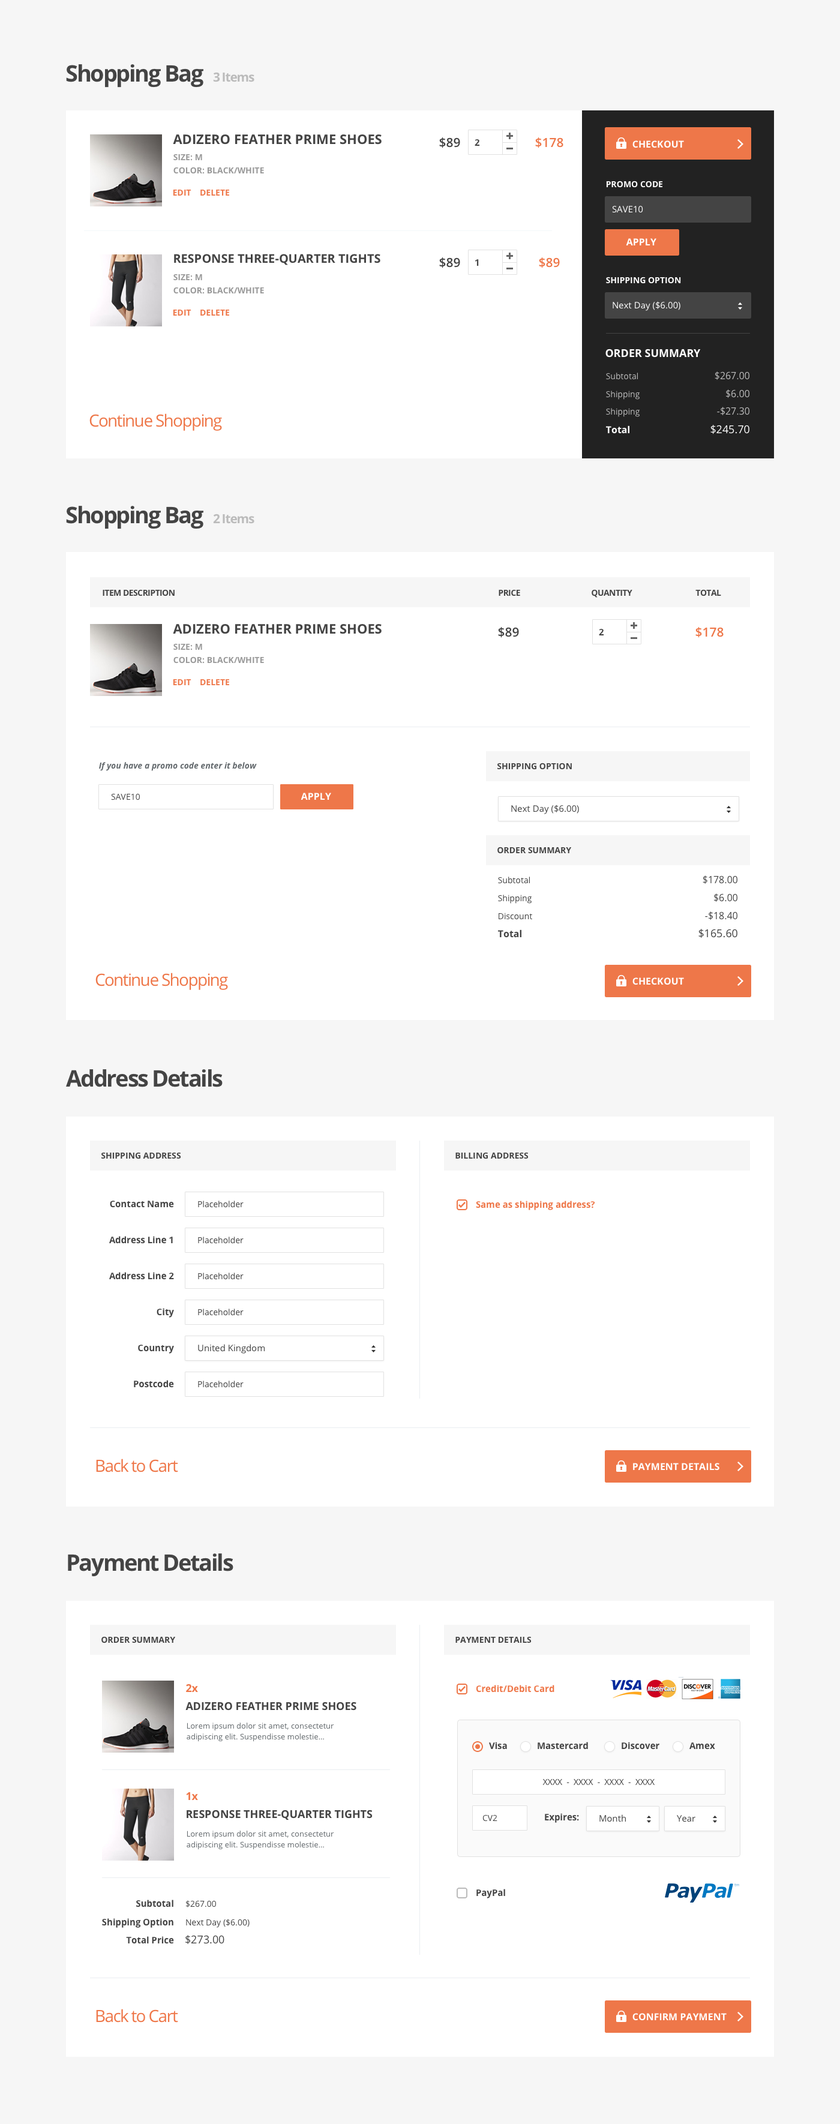
<style>
.page{position:relative;width:840px;height:2124px;background:#ffffff}
.page>*{position:absolute;margin:0}
.t1{font:22.8px "OpenSans-Bold";letter-spacing:-0.06em;color:#444444}
.t2{font:12.6px "OpenSans-Bold";letter-spacing:-0.06em;color:#bbbbbb}
.t3{font:13.2px "OpenSans-Bold";color:#444444;text-transform:uppercase}
.t4{font:12.6px "OpenSans-Semibold";color:#444444;text-transform:uppercase}
.t5{font:12.6px "OpenSans-Semibold";color:#ee7749;text-transform:uppercase}
.t6{font:9px "OpenSans-Bold";color:#444444;text-transform:uppercase}
.t7{font:9.6px "OpenSans-Bold";color:#ffffff;text-transform:uppercase}
.t8{font:8.4px/13.2px "OpenSans-Bold";color:#999999;text-transform:uppercase}
.t9{font:8.4px "OpenSans-Bold";color:#ffffff;text-transform:uppercase}
.t10{font:8.4px "OpenSans-Bold";color:#ee7749;text-transform:uppercase}
.t11{font:9px "OpenSans";color:#ffffff;text-transform:uppercase}
.t12{font:12px "OpenSans-Bold";color:#444444;text-transform:uppercase}
.t13{font:9px "OpenSans";color:#ffffff}
.t14{font:10.8px "OpenSans-Bold";color:#ffffff;text-transform:uppercase}
.t15{font:8.4px "OpenSans";color:#bbbbbb}
.t16{font:9.6px "OpenSans";color:#bbbbbb}
.t17{font:16.8px "OpenSans";letter-spacing:-0.06em;color:#ee7749}
.t18{font:9.6px "OpenSans-Bold";color:#ffffff}
.t19{font:10.8px "OpenSans";color:#ffffff}
.t20{font:8.4px "OpenSans-Bold";letter-spacing:-0.04em;color:#444444;text-transform:uppercase}
.t21{font:8.4px "OpenSans-BoldItalic";color:#63696d}
.t22{font:8.4px "OpenSans-Bold";color:#444444;text-transform:uppercase}
.t23{font:8.4px "OpenSans";color:#444444}
.t24{font:9px "OpenSans";color:#444444}
.t25{font:9.6px "OpenSans";color:#444444}
.t26{font:9.6px "OpenSans-Bold";color:#444444}
.t27{font:10.8px "OpenSans";color:#444444}
.t28{font:9px "OpenSans-Bold";color:#444444}
.t29{font:9px "OpenSans-Bold";color:#ee7749}
.t30{font:10.8px "OpenSans-Bold";color:#ee7749}
.t31{font:10.8px "OpenSans-Bold";color:#444444;text-transform:uppercase}
.t32{font:7.8px/10.8px "OpenSans";color:#63696d}
</style>
<div class="page">
<p class="t1" style="left:66px;top:64px;width:137px;height:24px">Shopping Bag</p>
<p class="t2" style="left:213px;top:72px;width:41px;height:10px">3 Items</p>
<p class="t3" style="left:173px;top:134px;width:209px;height:11px">adizero Feather Prime Shoes</p>
<p class="t4" style="left:439px;top:137px;width:21px;height:11px">$89</p>
<p class="t5" style="left:535px;top:137px;width:28px;height:11px">$178</p>
<p class="t6" style="left:475px;top:139px;width:5px;height:7px">2</p>
<p class="t7" style="left:632px;top:140px;width:52px;height:8px">Checkout</p>
<p class="t8" style="left:173px;top:154px;width:91px;height:20px">Size: M  <br>Color: Black/White</p>
<p class="t9" style="left:606px;top:181px;width:56px;height:7px">Promo Code</p>
<p class="t10" style="left:173px;top:190px;width:56px;height:6px">Edit    Delete</p>
<p class="t11" style="left:612px;top:206px;width:31px;height:7px">SAVE10</p>
<p class="t7" style="left:626px;top:238px;width:30px;height:7px">Apply</p>
<p class="t12" style="left:174px;top:254px;width:206px;height:11px">Response Three-Quarter Tights</p>
<p class="t4" style="left:439px;top:257px;width:21px;height:11px">$89</p>
<p class="t5" style="left:539px;top:257px;width:21px;height:11px">$89</p>
<p class="t6" style="left:475px;top:259px;width:4px;height:7px">1</p>
<p class="t8" style="left:173px;top:274px;width:91px;height:20px">Size: M  <br>Color: Black/White</p>
<p class="t9" style="left:606px;top:277px;width:75px;height:7px">Shipping Option</p>
<p class="t13" style="left:613px;top:301px;width:67px;height:10px">Next Day ($6.00)</p>
<p class="t10" style="left:173px;top:310px;width:56px;height:6px">Edit    Delete</p>
<p class="t14" style="left:605px;top:349px;width:96px;height:9px">Order Summary</p>
<p class="t15" style="left:606px;top:373px;width:32px;height:7px">Subtotal</p>
<p class="t16" style="left:715px;top:371px;width:34px;height:9px">$267.00</p>
<p class="t16" style="left:726px;top:389px;width:23px;height:9px">$6.00</p>
<p class="t15" style="left:606px;top:391px;width:34px;height:9px">Shipping</p>
<p class="t17" style="left:89px;top:413px;width:133px;height:18px">Continue Shopping</p>
<p class="t15" style="left:606px;top:408px;width:34px;height:9px">Shipping</p>
<p class="t16" style="left:717px;top:407px;width:32px;height:8px">-$27.30</p>
<p class="t18" style="left:606px;top:425px;width:23px;height:9px">Total</p>
<p class="t19" style="left:710px;top:425px;width:39px;height:9px">$245.70</p>
<p class="t1" style="left:66px;top:506px;width:137px;height:23px">Shopping Bag</p>
<p class="t2" style="left:213px;top:514px;width:41px;height:10px">2 Items</p>
<p class="t20" style="left:103px;top:589px;width:72px;height:7px">Item Description</p>
<p class="t20" style="left:499px;top:589px;width:21px;height:7px">Price</p>
<p class="t20" style="left:592px;top:589px;width:40px;height:9px">Quantity</p>
<p class="t20" style="left:695px;top:589px;width:26px;height:7px">Total</p>
<p class="t3" style="left:173px;top:624px;width:209px;height:10px">adizero Feather Prime Shoes</p>
<p class="t4" style="left:498px;top:627px;width:21px;height:11px">$89</p>
<p class="t6" style="left:599px;top:629px;width:5px;height:6px">2</p>
<p class="t5" style="left:695px;top:627px;width:29px;height:11px">$178</p>
<p class="t8" style="left:173px;top:643px;width:91px;height:21px">Size: M  <br>Color: Black/White</p>
<p class="t10" style="left:173px;top:679px;width:56px;height:6px">Edit    Delete</p>
<p class="t21" style="left:99px;top:762px;width:158px;height:9px">If you have a promo code enter it below</p>
<p class="t22" style="left:497px;top:763px;width:75px;height:7px">Shipping Option</p>
<p class="t23" style="left:111px;top:793px;width:29px;height:7px">SAVE10</p>
<p class="t7" style="left:301px;top:793px;width:30px;height:7px">Apply</p>
<p class="t24" style="left:511px;top:805px;width:68px;height:9px">Next Day ($6.00)</p>
<p class="t22" style="left:497px;top:847px;width:74px;height:7px">Order Summary</p>
<p class="t23" style="left:498px;top:877px;width:32px;height:7px">Subtotal</p>
<p class="t25" style="left:703px;top:875px;width:34px;height:9px">$178.00</p>
<p class="t25" style="left:714px;top:893px;width:23px;height:9px">$6.00</p>
<p class="t23" style="left:498px;top:895px;width:34px;height:9px">Shipping</p>
<p class="t23" style="left:499px;top:913px;width:33px;height:7px">Discount</p>
<p class="t25" style="left:705px;top:911px;width:32px;height:9px">-$18.40</p>
<p class="t26" style="left:498px;top:929px;width:23px;height:9px">Total</p>
<p class="t27" style="left:698px;top:929px;width:39px;height:9px">$165.60</p>
<p class="t17" style="left:95px;top:973px;width:133px;height:17px">Continue Shopping</p>
<p class="t7" style="left:632px;top:977px;width:52px;height:8px">Checkout</p>
<p class="t1" style="left:66px;top:1069px;width:157px;height:18px">Address Details</p>
<p class="t22" style="left:101px;top:1152px;width:80px;height:7px">Shipping Address</p>
<p class="t22" style="left:455px;top:1152px;width:74px;height:7px">Billing Address</p>
<p class="t28" style="left:110px;top:1201px;width:64px;height:7px">Contact Name</p>
<p class="t23" style="left:198px;top:1201px;width:46px;height:7px">Placeholder</p>
<p class="t29" style="left:476px;top:1201px;width:119px;height:9px">Same as shipping address?</p>
<p class="t28" style="left:109px;top:1236px;width:64px;height:8px">Address Line 1</p>
<p class="t23" style="left:198px;top:1237px;width:46px;height:7px">Placeholder</p>
<p class="t28" style="left:109px;top:1272px;width:65px;height:8px">Address Line 2</p>
<p class="t23" style="left:198px;top:1273px;width:46px;height:7px">Placeholder</p>
<p class="t28" style="left:157px;top:1308px;width:17px;height:10px">City</p>
<p class="t23" style="left:198px;top:1309px;width:46px;height:7px">Placeholder</p>
<p class="t28" style="left:138px;top:1345px;width:36px;height:9px">Country</p>
<p class="t24" style="left:198px;top:1344px;width:67px;height:10px">United Kingdom</p>
<p class="t28" style="left:134px;top:1380px;width:40px;height:8px">Postcode</p>
<p class="t23" style="left:198px;top:1381px;width:46px;height:7px">Placeholder</p>
<p class="t17" style="left:96px;top:1459px;width:82px;height:13px">Back to Cart</p>
<p class="t7" style="left:633px;top:1463px;width:86px;height:8px">Payment Details</p>
<p class="t1" style="left:68px;top:1553px;width:165px;height:24px">Payment Details</p>
<p class="t22" style="left:101px;top:1636px;width:74px;height:7px">Order Summary</p>
<p class="t22" style="left:455px;top:1636px;width:77px;height:7px">Payment Details</p>
<p class="t30" style="left:186px;top:1684px;width:12px;height:8px">2x</p>
<p class="t29" style="left:476px;top:1685px;width:78px;height:8px">Credit/Debit Card</p>
<p class="t31" style="left:185px;top:1702px;width:171px;height:9px">adizero Feather Prime Shoes</p>
<p class="t32" style="left:187px;top:1723px;width:147px;height:19px">Lorem ipsum dolor sit amet, consectetur adipiscing elit. Suspendisse molestie...</p>
<p class="t28" style="left:489px;top:1742px;width:18px;height:8px">Visa</p>
<p class="t28" style="left:538px;top:1742px;width:50px;height:8px">Mastercard</p>
<p class="t28" style="left:622px;top:1742px;width:37px;height:8px">Discover</p>
<p class="t28" style="left:689px;top:1742px;width:26px;height:8px">Amex</p>
<p class="t23" style="left:542px;top:1779px;width:113px;height:6px">XXXX  -  XXXX  -  XXXX  -  XXXX</p>
<p class="t30" style="left:186px;top:1792px;width:12px;height:8px">1x</p>
<p class="t31" style="left:187px;top:1810px;width:186px;height:10px">Response Three-Quarter Tights</p>
<p class="t23" style="left:482px;top:1814px;width:15px;height:8px">CV2</p>
<p class="t28" style="left:545px;top:1813px;width:34px;height:10px">Expires:</p>
<p class="t24" style="left:599px;top:1814px;width:27px;height:8px">Month</p>
<p class="t24" style="left:677px;top:1815px;width:18px;height:7px">Year</p>
<p class="t32" style="left:187px;top:1831px;width:147px;height:19px">Lorem ipsum dolor sit amet, consectetur adipiscing elit. Suspendisse molestie...</p>
<p class="t28" style="left:476px;top:1889px;width:29px;height:9px">PayPal</p>
<p class="t28" style="left:136px;top:1900px;width:37px;height:7px">Subtotal</p>
<p class="t23" style="left:185px;top:1900px;width:31px;height:7px">$267.00</p>
<p class="t28" style="left:102px;top:1918px;width:71px;height:10px">Shipping Option</p>
<p class="t23" style="left:186px;top:1919px;width:64px;height:9px">Next Day ($6.00)</p>
<p class="t28" style="left:126px;top:1936px;width:48px;height:8px">Total Price</p>
<p class="t27" style="left:185px;top:1935px;width:39px;height:9px">$273.00</p>
<p class="t17" style="left:96px;top:2009px;width:82px;height:14px">Back to Cart</p>
<p class="t7" style="left:632px;top:2013px;width:95px;height:8px">Confirm Payment</p>
</div>
